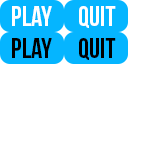
<style>
.page{position:relative;width:160px;height:160px;background:#ffffff}
.page>*{position:absolute;margin:0}
.t1{font:28.2px "BebasNeue";color:#ffffff}
.t2{font:28.2px "BebasNeue";color:#000000}
</style>
<div class="page">
<p class="t1" style="left:12px;top:6px;width:40px;height:20px">PLAY</p>
<p class="t1" style="left:79px;top:6px;width:37px;height:22px">QUIT</p>
<p class="t2" style="left:12px;top:38px;width:40px;height:20px">PLAY</p>
<p class="t2" style="left:79px;top:38px;width:37px;height:22px">QUIT</p>
</div>
